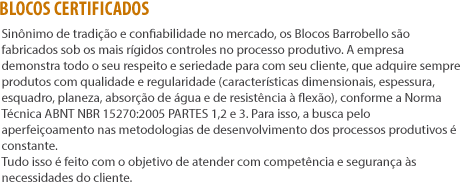
<style>
.page{position:relative;width:460px;height:185px;background:#ffffff}
.page>*{position:absolute;margin:0}
.t1{font:20px "MyriadPro-BoldCond";color:#c87400}
.t2{font:13px/16px "MyriadPro-Regular";color:#403f41}
</style>
<div class="page">
<p class="t1" style="left:0px;top:1px;width:149px;height:15px">BLOCOS CERTIFICADOS</p>
<p class="t2" style="left:1px;top:28px;width:459px;height:154px">Sinônimo de tradição e confiabilidade no mercado, os Blocos Barrobello são fabricados sob os mais rígidos controles no processo produtivo. A empresa demonstra todo o seu respeito e seriedade para com seu cliente, que adquire sempre produtos com qualidade e regularidade (características dimensionais, espessura, esquadro, planeza, absorção de água e de resistência à flexão), conforme a Norma Técnica ABNT NBR 15270:2005 PARTES 1,2 e 3. Para isso, a busca pelo aperfeiçoamento nas metodologias de desenvolvimento dos processos produtivos é constante.<br>Tudo isso é feito com o objetivo de atender com competência e segurança às necessidades do cliente.</p>
</div>
